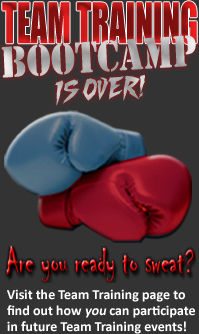
<style>
.page{position:relative;width:199px;height:334px;background:#333333}
.page>*{position:absolute;margin:0}
.t1{font:40.9px/108px "StencilStd";scale:0.83 1}
.t2{font:24px/28px "FightingSpiritTBS-Bold";scale:0.79 1}
.t3{font:14px/16px "Calibri-Bold";color:#ffffff}
.t4{font:14px/16px "Calibri-Bold";color:#ffffff;font-style:italic}
</style>
<div class="page">
<p class="t1" style="left:1px;top:35px;width:195px;height:71px;text-align:center;rotate:-4deg">BOOTCAMP<br><span class="t2">IS OVER!</span></p>
<p class="t3" style="left:7px;top:289px;width:188px;height:45px">Visit the Team Training page to <br>find out how <span class="t4">you </span>can participate<br>in future Team Training events!</p>
</div>
